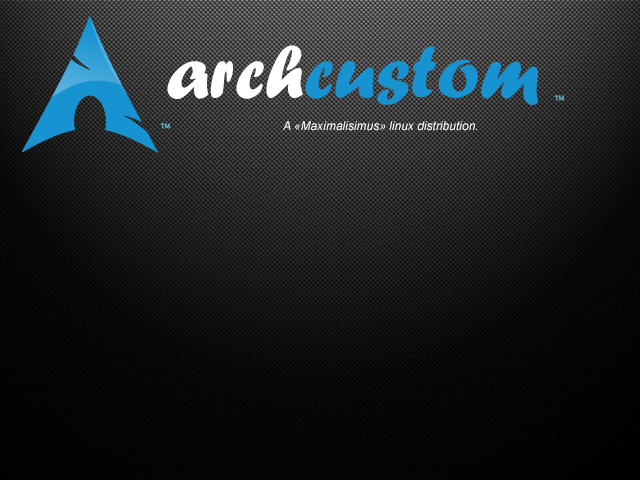
<style>
.page{position:relative;width:640px;height:480px}
.page>*{position:absolute;margin:0}
.t1{font:78px "ForteMT";color:#1793d1}
.t2{font:78px "ForteMT";color:#ffffff}
.t3{font:6px "Georgia";color:#66bace}
.t4{font:12px "Arial-ItalicMT";color:#ffffff}
</style>
<div class="page">
<p class="t1" style="left:167px;top:45px;width:371px;height:60px"><span class="t2">arch</span>custom</p>
<p class="t3" style="left:554px;top:95px;width:11px;height:6px">TM</p>
<p class="t3" style="left:160px;top:123px;width:11px;height:6px">TM</p>
<p class="t4" style="left:283px;top:121px;width:195px;height:10px">A «Maximalisimus» linux distribution.</p>
</div>
